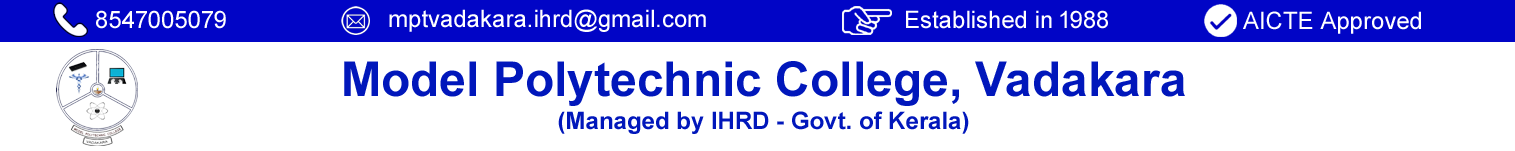
<style>
.page{position:relative;width:1515px;height:151px;background:#ffffff}
.page>*{position:absolute;margin:0}
.t1{font:24px "ArialMT";color:#ffffff}
.t2{font:48px/33px "Arial-BoldMT";color:#0117bb}
.t3{font:24px/33px "Arial-BoldMT";color:#0117bb}
</style>
<div class="page">
<p class="t1" style="left:96px;top:10px;width:130px;height:19px">8547005079</p>
<p class="t1" style="left:389px;top:9px;width:317px;height:23px">mptvadakara.ihrd@gmail.com</p>
<p class="t1" style="left:906px;top:10px;width:202px;height:19px">Established in 1988</p>
<p class="t1" style="left:1243px;top:11px;width:178px;height:23px">AICTE Approved</p>
<p class="t2" style="left:344px;top:61px;width:841px;height:73px;text-align:center">Model Polytechnic College, Vadakara<br><span class="t3">(Managed by IHRD - Govt. of Kerala)</span></p>
</div>
